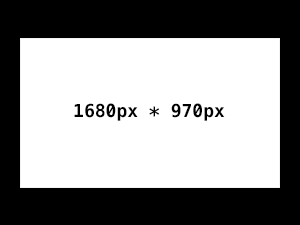
<style>
.page{position:relative;width:300px;height:225px;background:#ffffff}
.page>*{position:absolute;margin:0}
.t1{font:18px "Menlo-Bold";color:#000000}
</style>
<div class="page">
<p class="t1" style="left:74px;top:103px;width:151px;height:18px">1680px * 970px</p>
</div>
